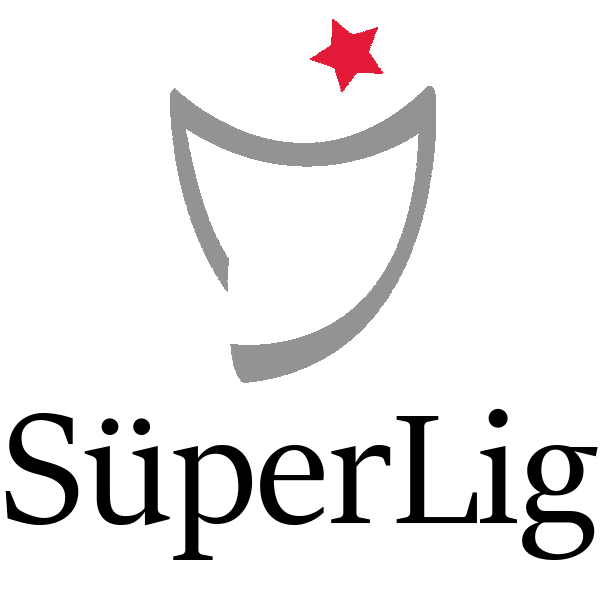
<style>
.page{position:relative;width:600px;height:600px;background:#ffffff}
.page>*{position:absolute;margin:0}
.t1{font:175px "SitkaBanner";color:#000000}
</style>
<div class="page">
<p class="t1" style="left:5px;top:408px;width:593px;height:152px">SüperLig</p>
</div>
